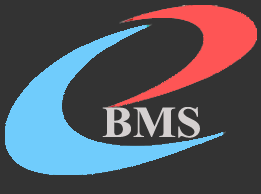
<style>
.page{position:relative;width:261px;height:194px;background:#333333}
.page>*{position:absolute;margin:0}
.t1{font:54.8px "Aparajita-Bold";color:#d4d0d0;scale:1.04 1}
</style>
<div class="page">
<p class="t1" style="left:102px;top:107px;width:98px;height:31px">BMS</p>
</div>
